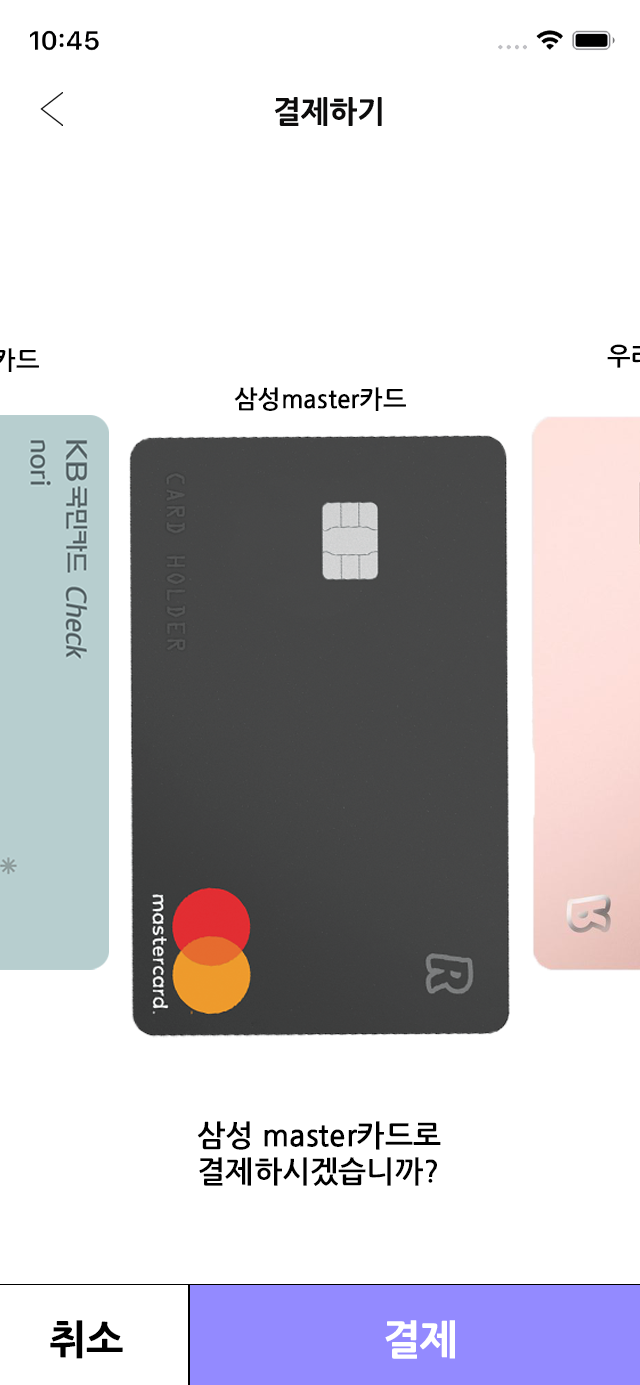
<style>
.page{position:relative;width:640px;height:1385px;background:#ffffff}
.page>*{position:absolute;margin:0}
.t1{font:30px "NanumGothicOTFExtraBold";color:#0d0c0c}
.t2{font:25px "NanumGothicOTFBold";color:#000000}
.t3{font:30px "NanumGothicOTFBold";color:#000000}
.t4{font:40px "NanumGothicOTFExtraBold";color:#000000}
.t5{font:40px "NanumGothicOTFExtraBold";color:#ffffff}
</style>
<div class="page">
<p class="t1" style="left:274px;top:97px;width:108px;height:29px">결제하기</p>
<p class="t2" style="left:234px;top:387px;width:172px;height:24px">삼성master카드</p>
<p class="t3" style="left:197px;top:1121px;width:244px;height:65px">삼성 master카드로<br>결제하시겠습니까?</p>
<p class="t4" style="left:50px;top:1320px;width:73px;height:39px">취소</p>
<p class="t5" style="left:385px;top:1320px;width:70px;height:39px">결제</p>
</div>
